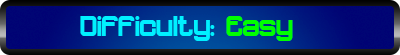
<style>
.page{position:relative;width:400px;height:55px}
.page>*{position:absolute;margin:0}
.t1{font:30px "Dopenakedfoulphat";color:#00f0ff}
.t2{font:30px "Dopenakedfoulphat";color:#00ff00}
</style>
<div class="page">
<p class="t1" style="left:80px;top:16px;width:135px;height:25px">Difficulty:</p>
<p class="t2" style="left:226px;top:16px;width:67px;height:25px">Easy</p>
</div>
